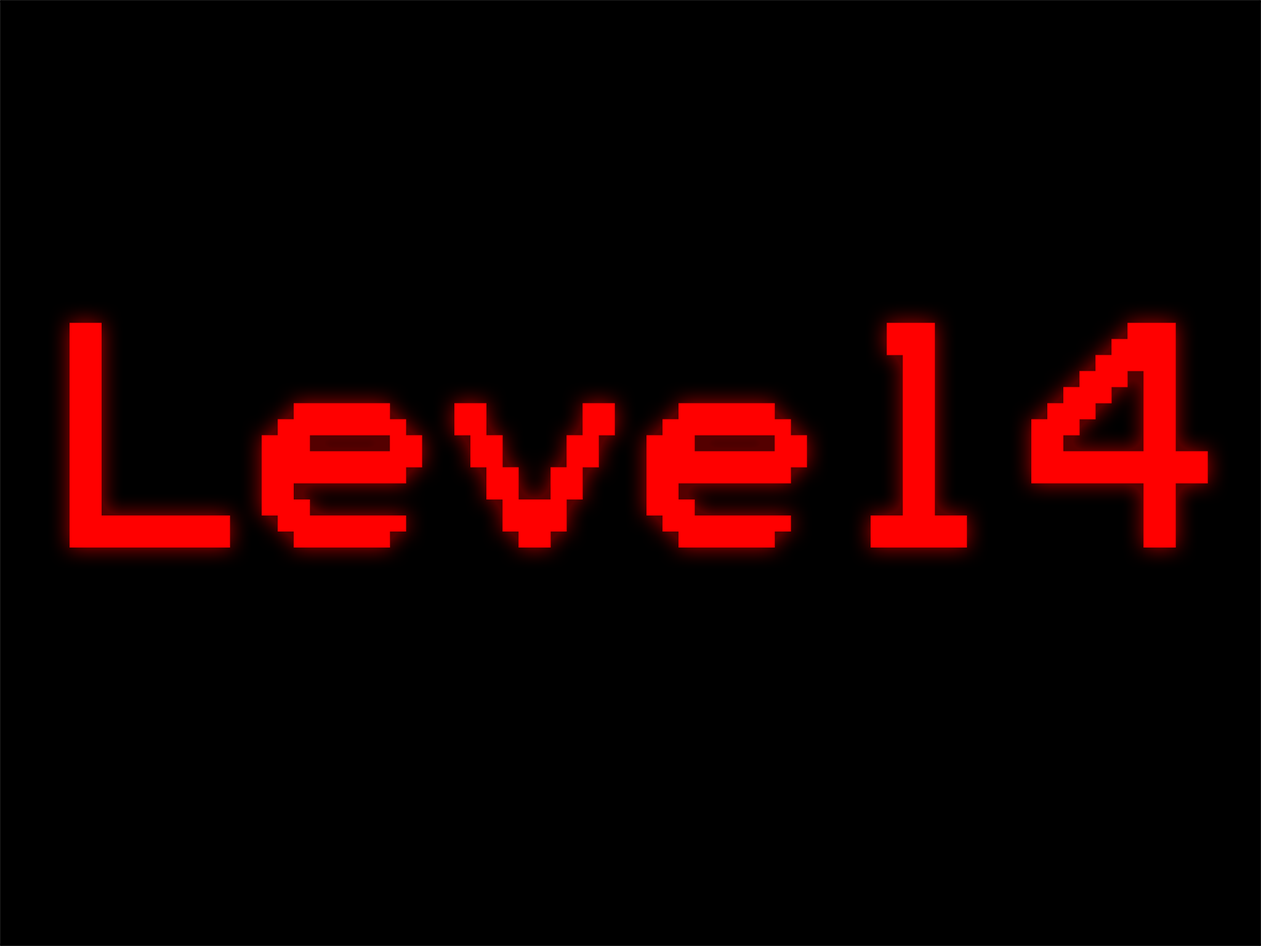
<style>
.page{position:relative;width:1261px;height:946px;background:#000000}
.page>*{position:absolute;margin:0}
.t1{font:256.5px "Terminal";color:#ff0000}
</style>
<div class="page">
<p class="t1" style="left:70px;top:323px;width:1138px;height:224px">Level4</p>
</div>
